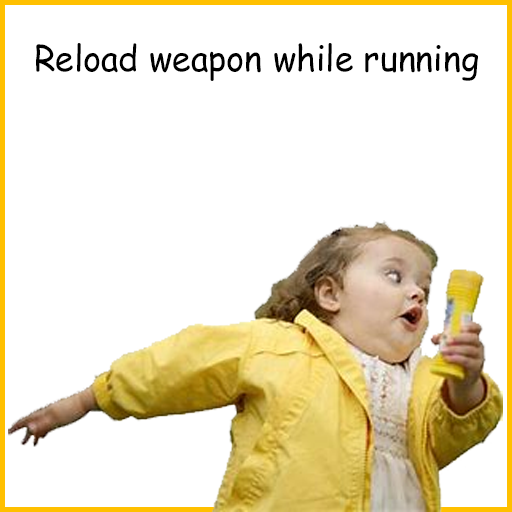
<style>
.page{position:relative;width:512px;height:512px;background:#ffffff}
.page>*{position:absolute;margin:0}
.t1{font:35.5px "ComicSansMS";color:#000000;scale:0.96 1}
</style>
<div class="page">
<p class="t1" style="left:36px;top:43px;width:442px;height:38px">Reload weapon while running</p>
</div>
